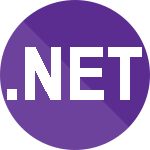
<style>
.page{position:relative;width:150px;height:150px;background:#ffffff}
.page>*{position:absolute;margin:0}
.t1{font:71.7px "ArialNarrow-Bold";color:#ffffff;font-weight:bold}
</style>
<div class="page">
<p class="t1" style="left:7px;top:47px;width:135px;height:53px">.NET</p>
</div>
